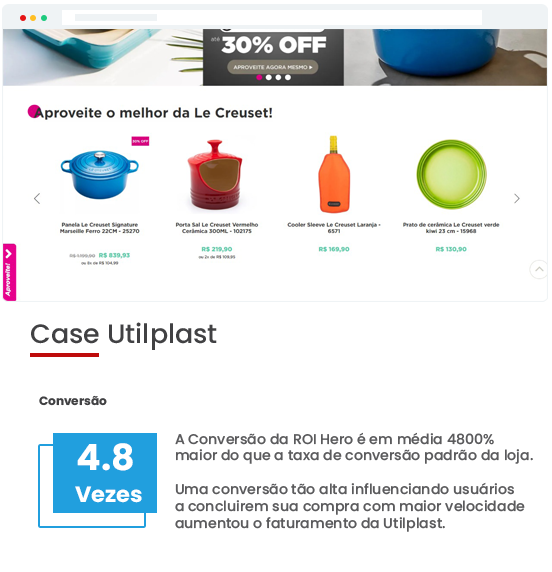
<style>
.page{position:relative;width:552px;height:572px;background:#ffffff}
.page>*{position:absolute;margin:0}
.t1{font:26.6px "Poppins-Medium";color:#414143}
.t2{font:12px "Poppins-Bold";color:#414143}
.t3{font:14px "Poppins-Medium";color:#5b5b5d}
.t4{font:36px "Poppins-Bold";color:#ffffff}
.t5{font:21.9px "Poppins-Bold";color:#ffffff}
</style>
<div class="page">
<p class="t1" style="left:31px;top:322px;width:186px;height:28px">Case Utilplast</p>
<p class="t2" style="left:39px;top:395px;width:68px;height:11px">Conversão</p>
<p class="t3" style="left:175px;top:432px;width:358px;height:100px">A Conversão da ROI Hero é em média 4800%<br>maior do que a taxa de conversão padrão da loja.<br><br>Uma conversão tão alta influenciando usuários<br>a concluirem sua compra com maior velocidade<br>aumentou o faturamento da Utilplast.</p>
<p class="t4" style="left:77px;top:443px;width:56px;height:28px">4.8</p>
<p class="t5" style="left:75px;top:486px;width:67px;height:17px">Vezes</p>
</div>
